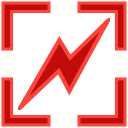
<style>
.page{position:relative;width:128px;height:128px;background:#ffffff}
.page>*{position:absolute;margin:0}
.t1{font:104px "SegoeUISymbol"}
</style>
<div class="page">
<p class="t1" style="left:18px;top:18px;width:92px;height:92px">🗲</p>
</div>
